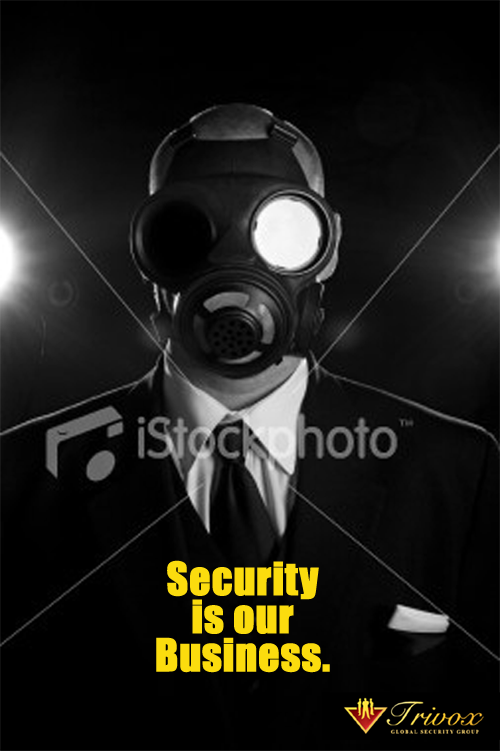
<style>
.page{position:relative;width:500px;height:751px;background:#000000}
.page>*{position:absolute;margin:0}
.t1{font:41.7px/38.1px "Impact";color:#fbdc0e;font-weight:bold}
</style>
<div class="page">
<p class="t1" style="left:156px;top:560px;width:174px;height:113px;text-align:center">Security<br>is our <br>Business.</p>
</div>
